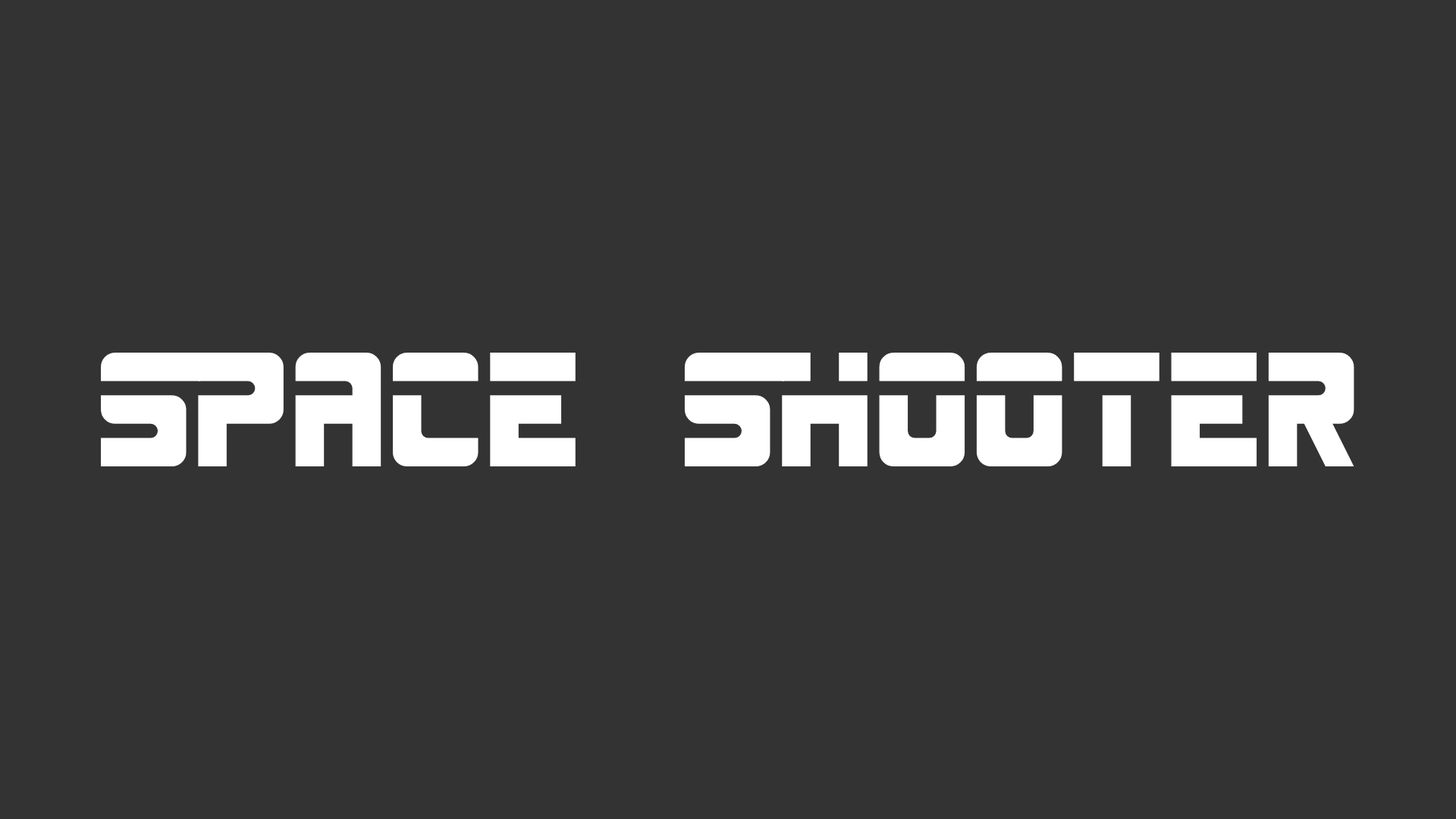
<style>
.page{position:relative;width:1456px;height:819px;background:#333333}
.page>*{position:absolute;margin:0}
.t1{font:113.7px "SPACEBAR";color:#ffffff}
</style>
<div class="page">
<p class="t1" style="left:101px;top:353px;width:1253px;height:113px">SPACE SHOOTER</p>
</div>
